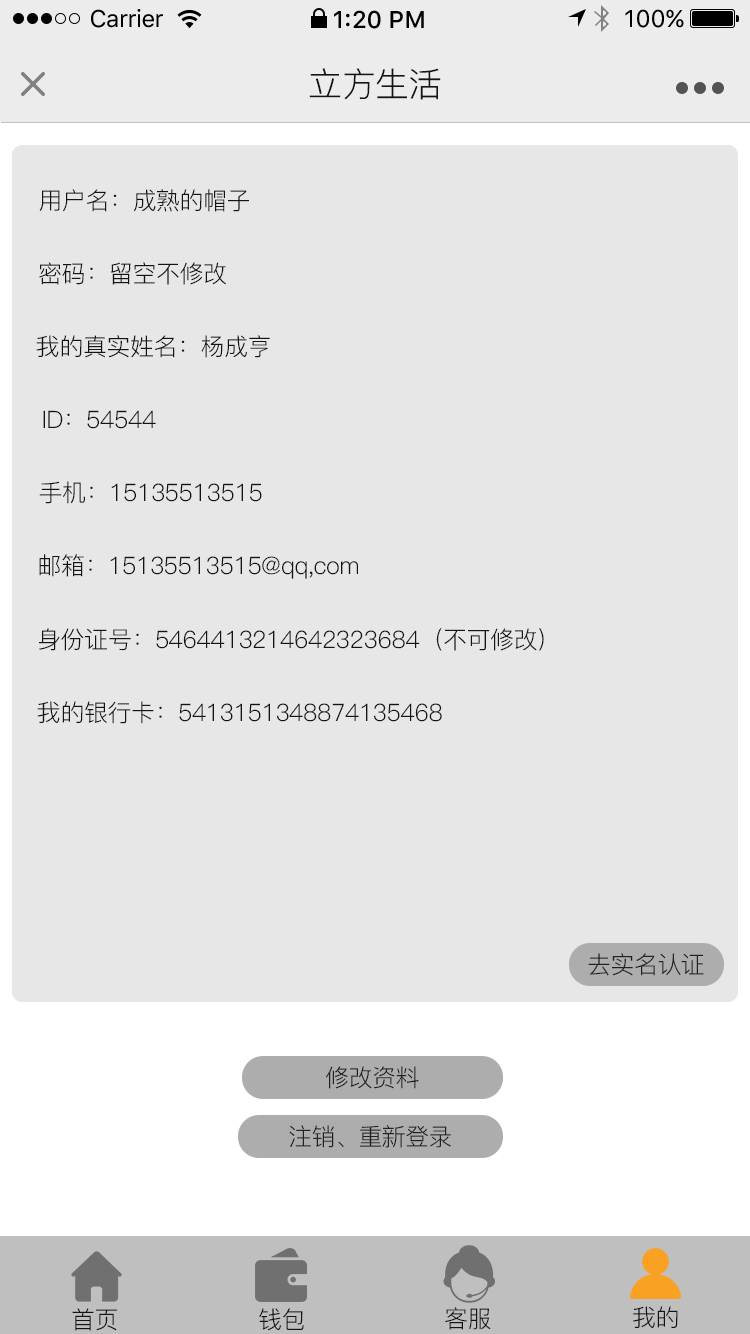
<style>
.page{position:relative;width:750px;height:1334px;background:#e7e7e7}
.page>*{position:absolute;margin:0}
.t1{font:24px "SFUIText-Regular";letter-spacing:-0.025em;color:#000000}
.t2{font:24px "SFUIText-Medium";color:#000000}
.t3{font:24px "SFUIText-Regular";color:#000000}
.t4{font:34px "PingFang-SC-Regular";letter-spacing:-0.02em;color:#141414}
.t5{font:24px "PingFang-SC-Regular";letter-spacing:-0.02em;color:#141414}
.t6{font:24px "PingFang-SC-Regular";letter-spacing:-0.024em;color:#212121}
</style>
<div class="page">
<p class="t1" style="left:91px;top:9px;width:72px;height:19px">Carrier</p>
<p class="t2" style="left:334px;top:10px;width:90px;height:19px">1:20 PM</p>
<p class="t3" style="left:625px;top:9px;width:59px;height:19px">100%</p>
<p class="t4" style="left:309px;top:68px;width:132px;height:32px">立方生活</p>
<p class="t5" style="left:39px;top:189px;width:210px;height:23px">用户名：成熟的帽子</p>
<p class="t5" style="left:39px;top:262px;width:187px;height:23px">密码：留空不修改</p>
<p class="t5" style="left:36px;top:335px;width:234px;height:23px">我的真实姓名：杨成亨</p>
<p class="t5" style="left:43px;top:410px;width:113px;height:19px">ID：54544</p>
<p class="t5" style="left:39px;top:481px;width:223px;height:23px">手机：15135513515</p>
<p class="t5" style="left:39px;top:554px;width:319px;height:25px">邮箱：15135513515@qq,com</p>
<p class="t5" style="left:39px;top:628px;width:505px;height:23px">身份证号：5464413214642323684（不可修改）</p>
<p class="t5" style="left:37px;top:701px;width:405px;height:23px">我的银行卡：5413151348874135468</p>
<p class="t6" style="left:588px;top:953px;width:116px;height:23px">去实名认证</p>
<p class="t6" style="left:326px;top:1066px;width:93px;height:23px">修改资料</p>
<p class="t6" style="left:289px;top:1125px;width:162px;height:23px">注销、重新登录</p>
<p class="t5" style="left:72px;top:1308px;width:45px;height:23px">首页</p>
<p class="t5" style="left:259px;top:1308px;width:45px;height:23px">钱包</p>
<p class="t5" style="left:445px;top:1307px;width:46px;height:23px">客服</p>
<p class="t5" style="left:633px;top:1306px;width:45px;height:22px">我的</p>
</div>
